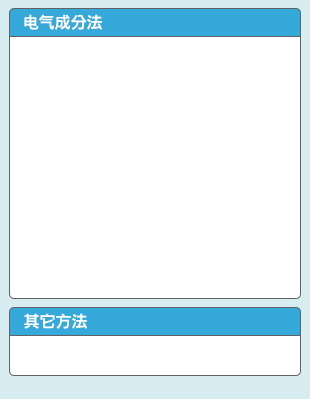
<style>
.page{position:relative;width:310px;height:399px;background:#ffffff}
.page>*{position:absolute;margin:0}
.t1{font:16px "LiHeiPro";color:#ffffff}
</style>
<div class="page">
<p class="t1" style="left:24px;top:14px;width:78px;height:16px">电气成分法</p>
<p class="t1" style="left:24px;top:313px;width:63px;height:16px">其它方法</p>
</div>
